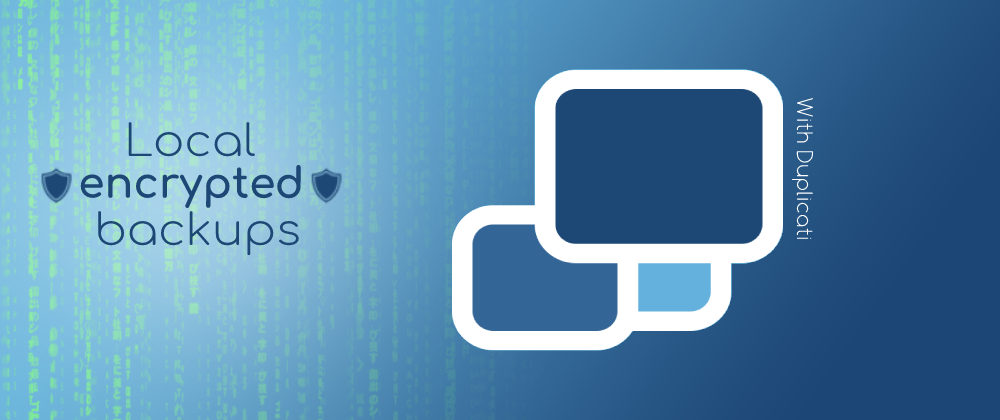
<style>
.page{position:relative;width:1000px;height:420px}
.page>*{position:absolute;margin:0}
.t1{font:23.8px "Comfortaa-Thin";color:#ffffff}
.t2{font:43.4px "Comfortaa-Light";color:#1d4775;scale:1.07 1}
.t3{font:42.4px "Comfortaa-Bold";color:#1d4775}
</style>
<div class="page">
<p class="t1" style="left:792px;top:98px;width:21px;height:141px;rotate:90deg">With Duplicati</p>
<p class="t2" style="left:128px;top:122px;width:127px;height:35px">Local</p>
<p class="t3" style="left:80px;top:165px;width:221px;height:43px">encrypted</p>
<p class="t2" style="left:98px;top:211px;width:201px;height:45px">backups</p>
</div>
